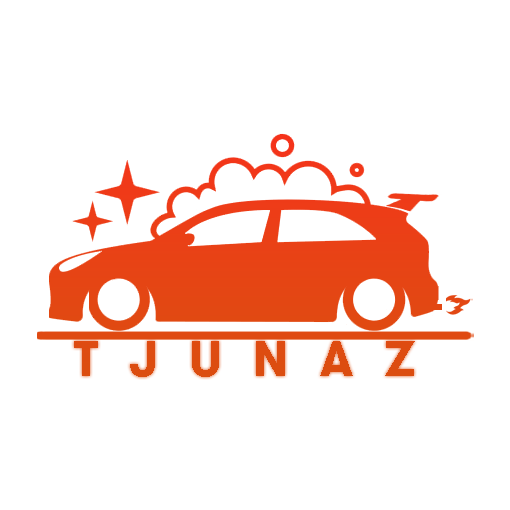
<style>
.page{position:relative;width:510px;height:510px;background:#ffffff}
.page>*{position:absolute;margin:0}
.t1{font:50px "GTWalsheimProBold";letter-spacing:0.62em;color:#dd4c10}
</style>
<div class="page">
<p class="t1" style="left:74px;top:341px;width:341px;height:36px">TJUNAZ</p>
</div>
